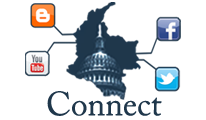
<style>
.page{position:relative;width:206px;height:120px;background:#ffffff}
.page>*{position:absolute;margin:0}
.t1{font:33.3px "ACaslonPro-Regular";color:#1f374b}
</style>
<div class="page">
<p class="t1" style="left:47px;top:91px;width:115px;height:25px">Connect</p>
</div>
